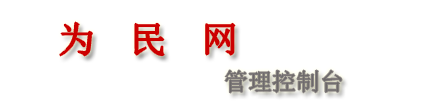
<style>
.page{position:relative;width:430px;height:109px;background:#ffffff}
.page>*{position:absolute;margin:0}
.t1{font:36px "SimSun";color:#cc0000}
.t2{font:24px "SimSun";color:#6c6969}
</style>
<div class="page">
<p class="t1" style="left:60px;top:22px;width:175px;height:34px">为  民  网</p>
<p class="t2" style="left:225px;top:70px;width:117px;height:23px">管理控制台</p>
</div>
